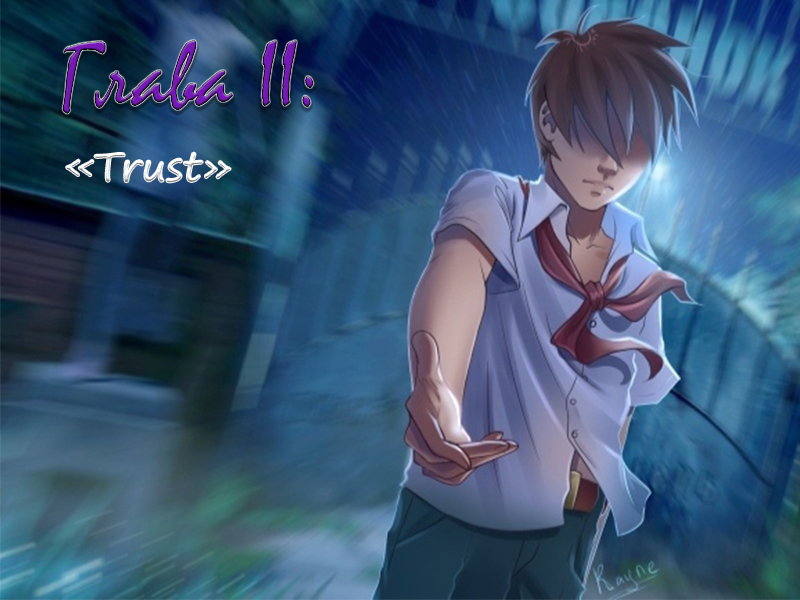
<style>
.page{position:relative;width:800px;height:600px}
.page>*{position:absolute;margin:0}
.t1{font:96px "Mistral"}
.t2{font:40.1px "SegoePrint"}
</style>
<div class="page">
<p class="t1" style="left:62px;top:40px;width:252px;height:74px">Глава II:</p>
<p class="t2" style="left:66px;top:152px;width:165px;height:31px">«Trust»</p>
</div>
